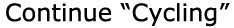
<style>
.page{position:relative;width:234px;height:28px;background:#ffffff}
.page>*{position:absolute;margin:0}
.t1{font:24px "Verdana";color:#000000}
</style>
<div class="page">
<p class="t1" style="left:6px;top:3px;width:224px;height:24px">Continue “Cycling”</p>
</div>
